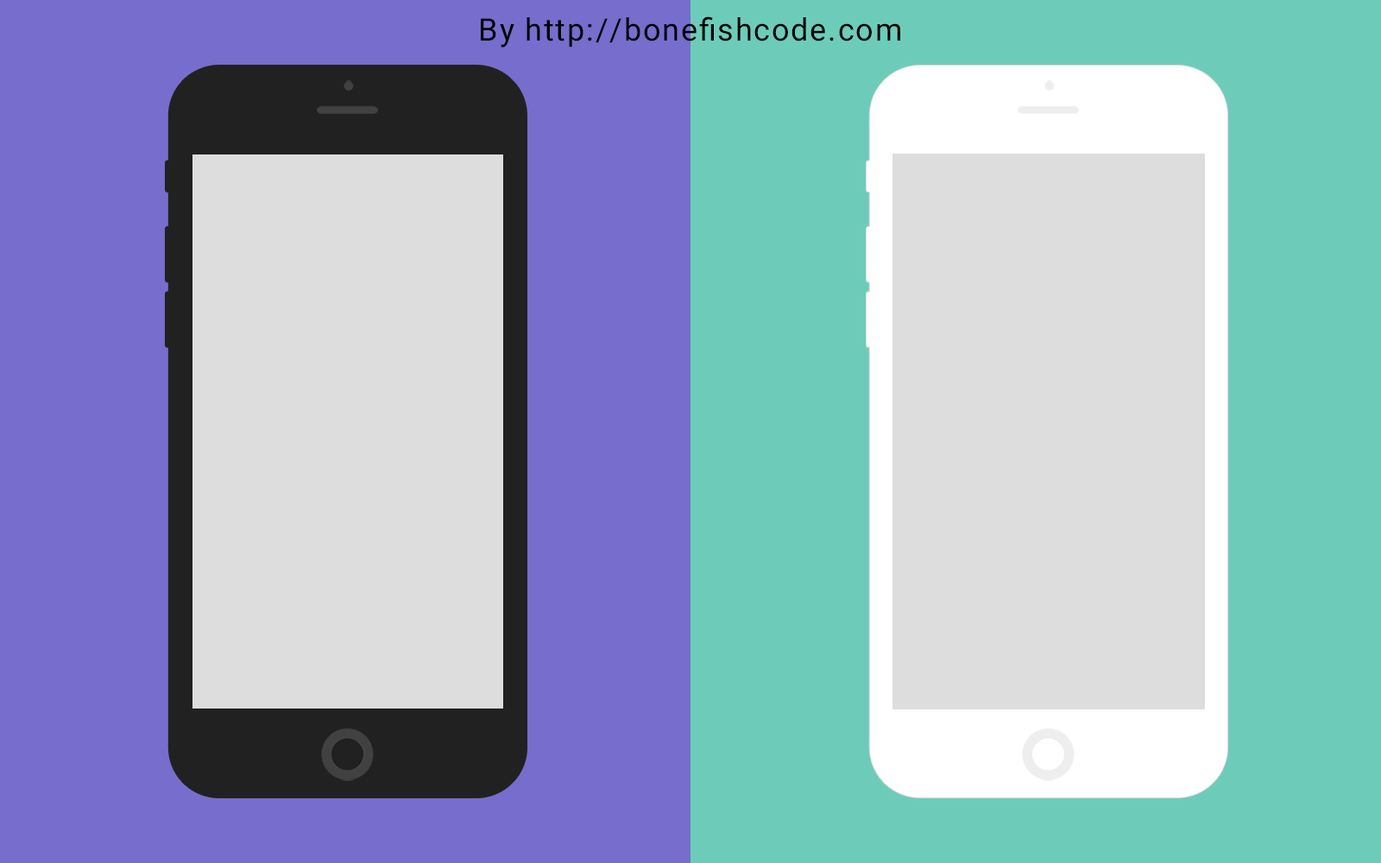
<style>
.page{position:relative;width:1381px;height:863px;background:#dddddd}
.page>*{position:absolute;margin:0}
.t1{font:31.1px "Roboto-Regular";letter-spacing:0.05em;color:#000000}
</style>
<div class="page">
<p class="t1" style="left:481px;top:16px;width:419px;height:31px">By http://bonefishcode.com</p>
</div>
